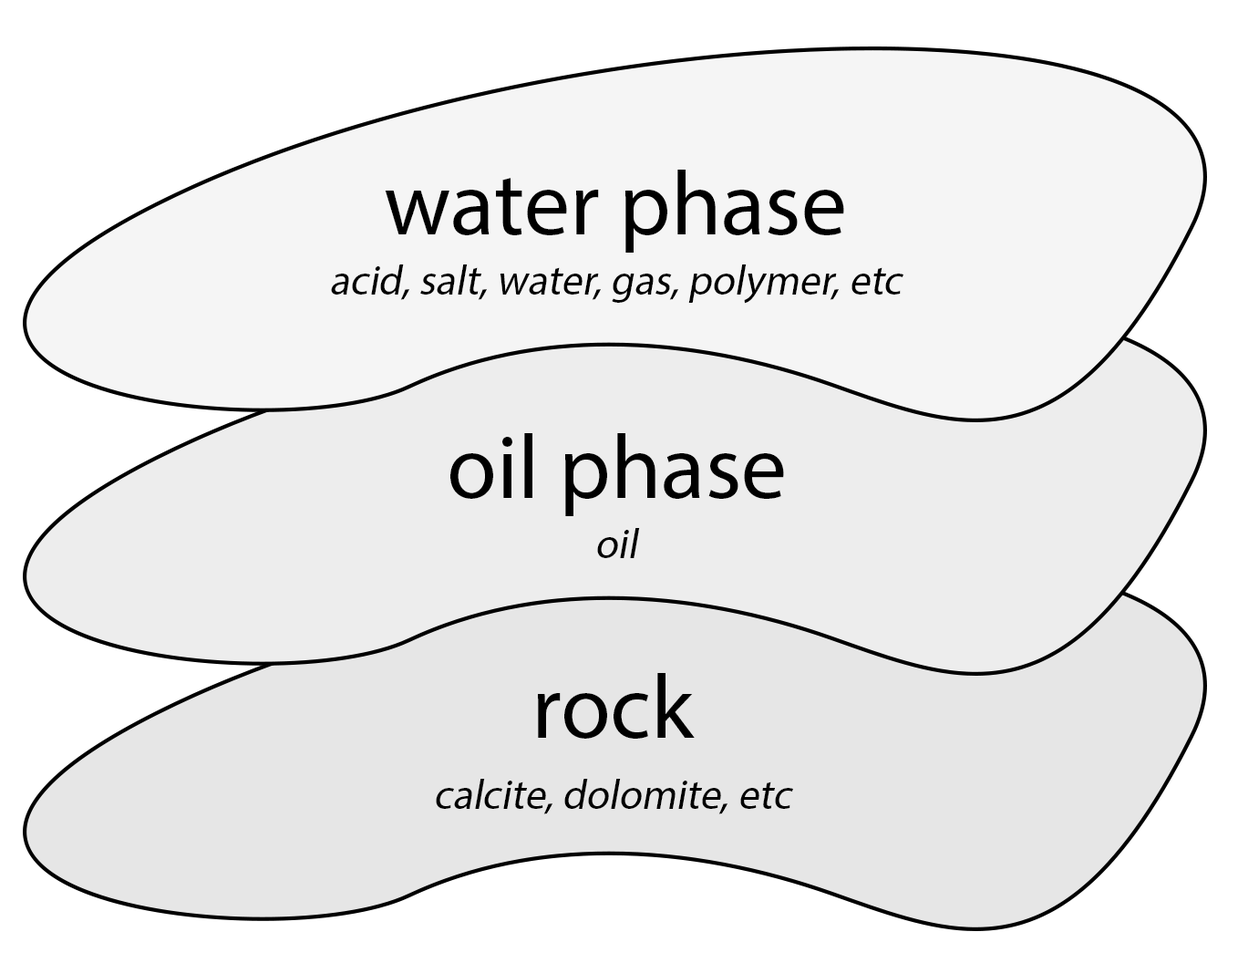
<style>
.page{position:relative;width:1238px;height:963px;background:#ffffff}
.page>*{position:absolute;margin:0}
.t1{font:91.2px "MyriadPro-Regular";color:#000000}
.t2{font:41.8px "MyriadPro-Regular";color:#000000;font-style:italic}
</style>
<div class="page">
<p class="t1" style="left:385px;top:170px;width:459px;height:83px">water phase</p>
<p class="t2" style="left:331px;top:264px;width:573px;height:40px">acid, salt, water, gas, polymer, etc</p>
<p class="t1" style="left:450px;top:433px;width:334px;height:83px">oil phase</p>
<p class="t2" style="left:597px;top:528px;width:43px;height:30px">oil</p>
<p class="t1" style="left:538px;top:673px;width:157px;height:66px">rock</p>
<p class="t2" style="left:436px;top:779px;width:357px;height:35px">calcite, dolomite, etc</p>
</div>
